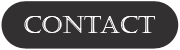
<style>
.page{position:relative;width:180px;height:50px;background:#323031}
.page>*{position:absolute;margin:0}
.t1{font:24px "Castellar";color:#ffffff}
</style>
<div class="page">
<p class="t1" style="left:24px;top:16px;width:132px;height:17px">Contact</p>
</div>
